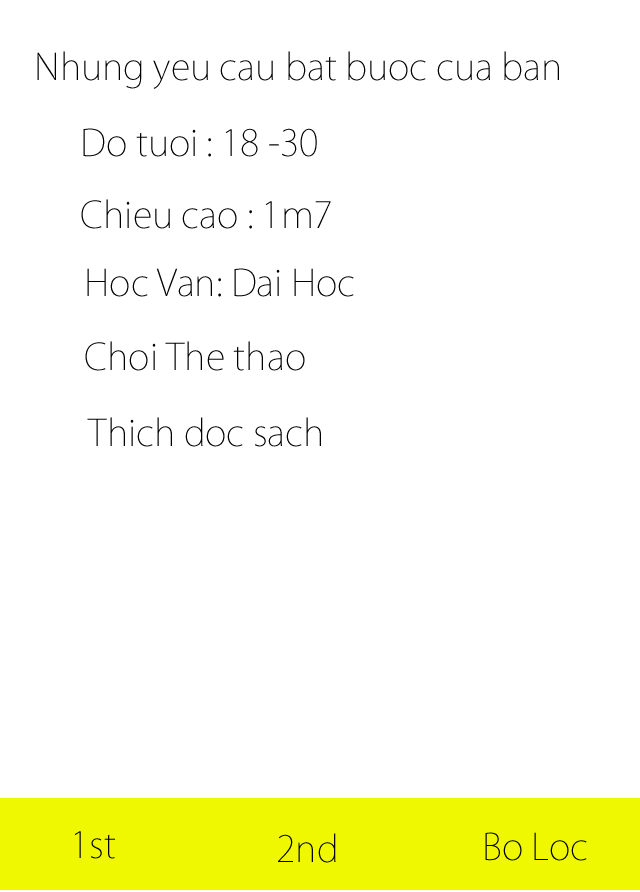
<style>
.page{position:relative;width:640px;height:892px;background:#ffffff}
.page>*{position:absolute;margin:0}
.t1{font:36px "KozGoPro-ExtraLight";color:#000000}
.t2{font:36px "KozGoPro-ExtraLight";color:#010101}
</style>
<div class="page">
<p class="t1" style="left:37px;top:51px;width:522px;height:38px">Nhung yeu cau bat buoc cua ban</p>
<p class="t1" style="left:83px;top:128px;width:234px;height:29px">Do tuoi : 18 -30</p>
<p class="t1" style="left:81px;top:199px;width:250px;height:30px">Chieu cao : 1m7</p>
<p class="t1" style="left:87px;top:268px;width:267px;height:29px">Hoc Van: Dai Hoc</p>
<p class="t1" style="left:85px;top:341px;width:220px;height:30px">Choi The thao</p>
<p class="t1" style="left:87px;top:417px;width:234px;height:30px">Thich doc sach</p>
<p class="t2" style="left:74px;top:831px;width:41px;height:28px">1st</p>
<p class="t2" style="left:278px;top:833px;width:58px;height:30px">2nd</p>
<p class="t2" style="left:485px;top:832px;width:102px;height:29px">Bo Loc</p>
</div>
